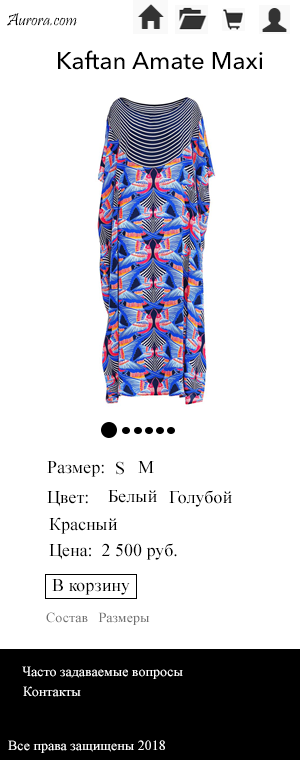
<style>
.page{position:relative;width:300px;height:760px;background:#ffffff}
.page>*{position:absolute;margin:0}
.t1{font:18px "Pristina-Regular";color:#000000}
.t2{font:24px "AvenirNextCyr-Medium";color:#000000}
.t3{font:18px "TimesNewRomanPSMT";color:#000000}
.t4{font:14px "TimesNewRomanPSMT";color:#717171}
.t5{font:14px "TimesNewRomanPSMT";color:#ffffff}
</style>
<div class="page">
<p class="t1" style="left:7px;top:13px;width:70px;height:13px">Aurora.com</p>
<p class="t2" style="left:58px;top:50px;width:205px;height:20px">Kaftan Amate Maxi</p>
<p class="t3" style="left:47px;top:461px;width:57px;height:16px">Размер:</p>
<p class="t3" style="left:116px;top:461px;width:8px;height:14px">S</p>
<p class="t3" style="left:138px;top:461px;width:16px;height:12px">M</p>
<p class="t3" style="left:47px;top:491px;width:41px;height:16px">Цвет:</p>
<p class="t3" style="left:108px;top:490px;width:49px;height:13px">Белый</p>
<p class="t3" style="left:169px;top:490px;width:63px;height:17px">Голубой</p>
<p class="t3" style="left:49px;top:517px;width:69px;height:17px">Красный</p>
<p class="t3" style="left:49px;top:543px;width:128px;height:17px">Цена:  2 500 руб.</p>
<p class="t3" style="left:52px;top:579px;width:78px;height:16px">В корзину</p>
<p class="t4" style="left:46px;top:612px;width:104px;height:13px">Состав   Размеры</p>
<p class="t5" style="left:22px;top:666px;width:161px;height:13px">Часто задаваемые вопросы</p>
<p class="t5" style="left:23px;top:686px;width:58px;height:11px">Контакты</p>
<p class="t5" style="left:8px;top:740px;width:157px;height:13px">Все права защищены 2018</p>
</div>
